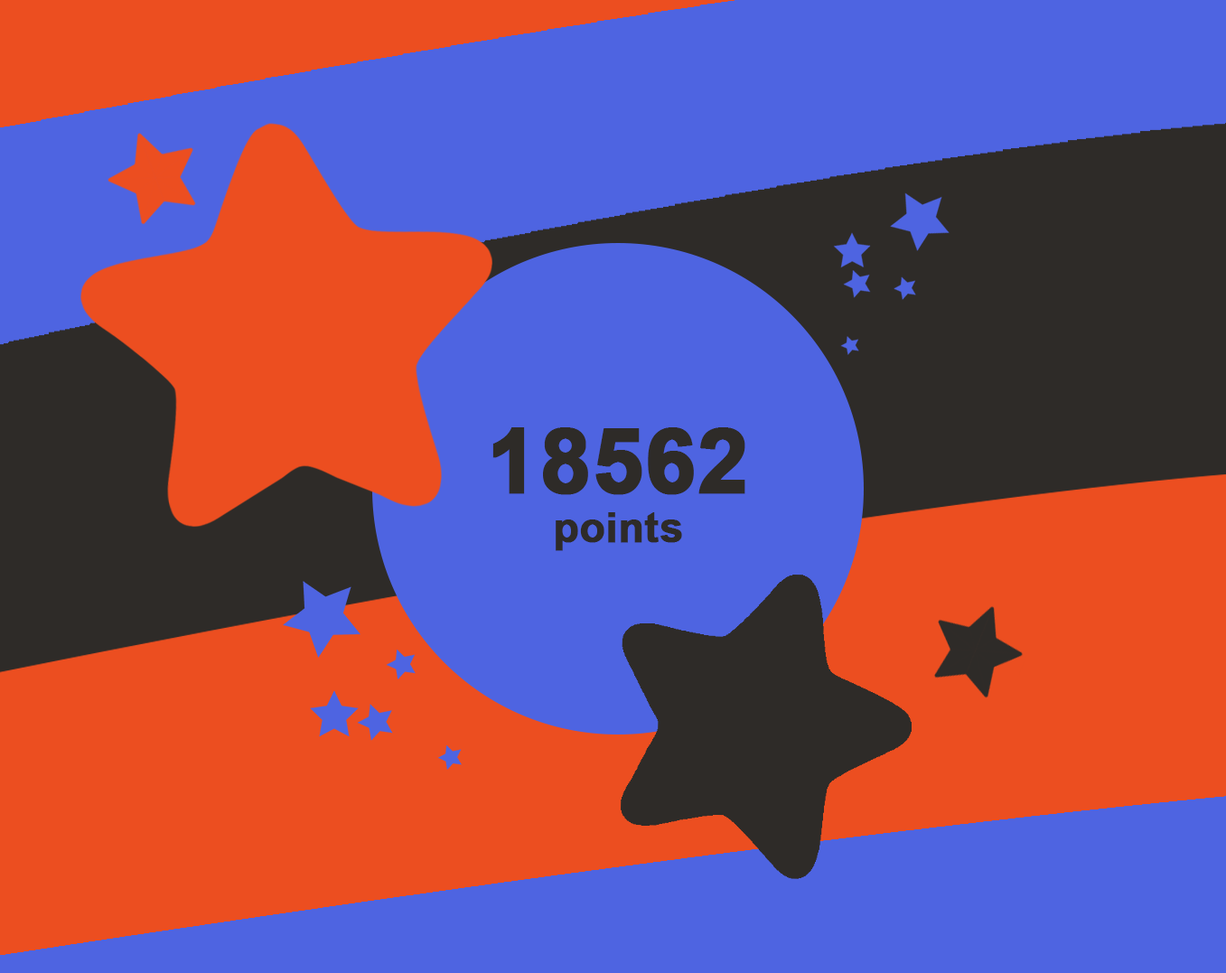
<style>
.page{position:relative;width:1226px;height:973px;background:#4e64e1}
.page>*{position:absolute;margin:0}
.t1{font:41.4px "Arial-BoldMT";color:#2e2b28;font-weight:bold}
.t2{font:90.3px "Arial-BoldMT";color:#2e2b28;font-weight:bold}
</style>
<div class="page">
<p class="t1" style="left:492px;top:427px;width:253px;height:124px;text-align:center"><span class="t2">18562<br></span>points</p>
</div>
